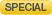
<style>
.page{position:relative;width:52px;height:15px}
.page>*{position:absolute;margin:0}
.t1{font:10px "HelveticaNeueLTPro-Md";color:#504f4f}
</style>
<div class="page">
<p class="t1" style="left:5px;top:3px;width:42px;height:8px">SPECIAL</p>
</div>
